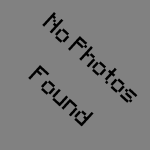
<style>
.page{position:relative;width:150px;height:150px;background:#818181}
.page>*{position:absolute;margin:0}
.t1{font:20px "Minecraft";color:#000000}
</style>
<div class="page">
<p class="t1" style="left:28px;top:12px;width:110px;height:115px;rotate:42deg">No Photos<br><br>     Found</p>
</div>
